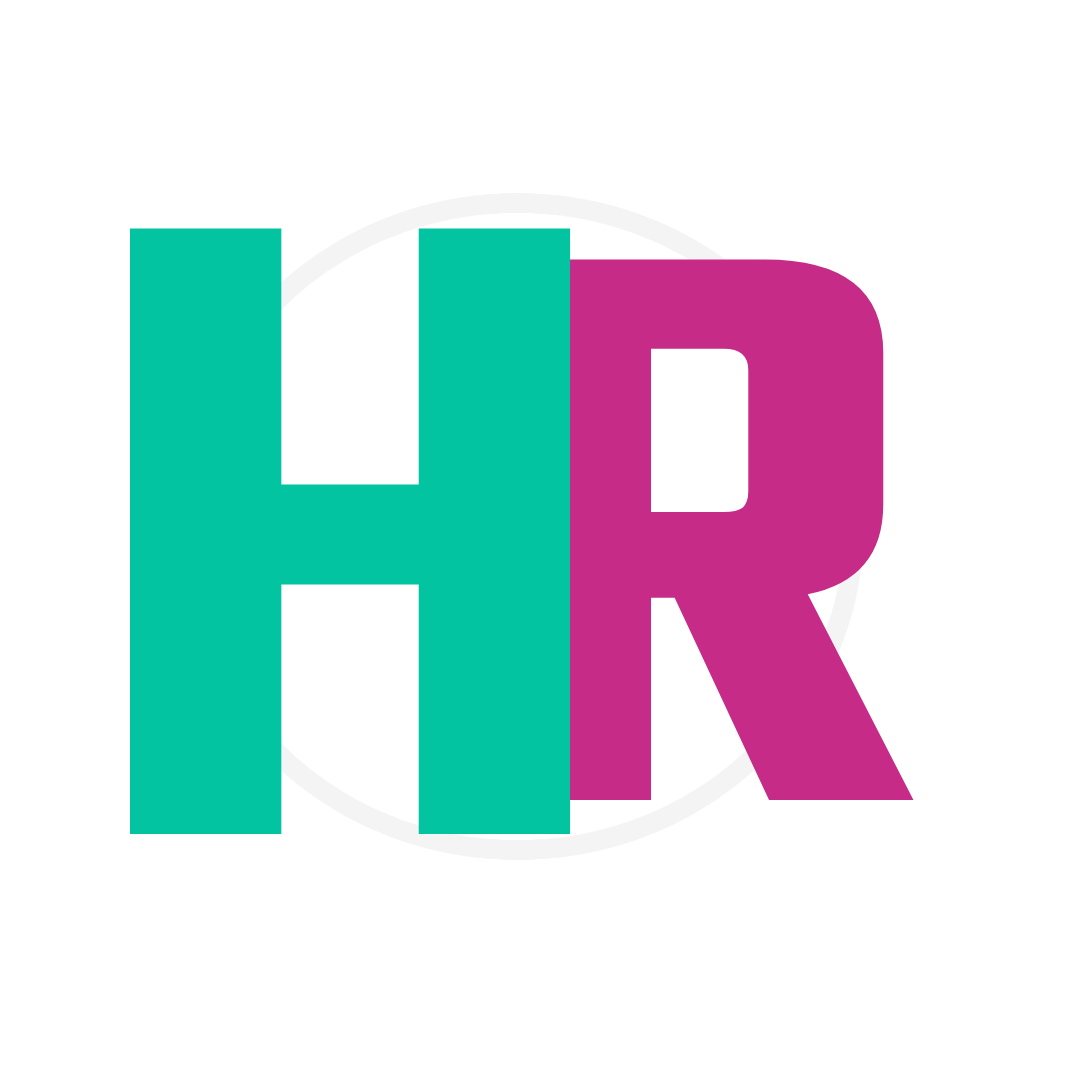
<style>
.page{position:relative;width:1080px;height:1080px;background:#ffffff}
.page>*{position:absolute;margin:0}
.t1{font:952px "Teko-SemiBold";color:#03c4a1;scale:1.13 1}
.t2{font:849.7px "Teko-SemiBold";color:#c62b88;scale:1.11 1}
</style>
<div class="page">
<p class="t1" style="left:130px;top:228px;width:441px;height:607px">H</p>
<p class="t2" style="left:517px;top:259px;width:397px;height:541px">R</p>
</div>
